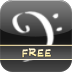
<style>
.page{position:relative;width:72px;height:72px}
.page>*{position:absolute;margin:0}
.t1{font:14px "RedStateBlueStateBB";letter-spacing:0.075em}
</style>
<div class="page">
<p class="t1" style="left:22px;top:48px;width:29px;height:10px">FREE</p>
</div>
